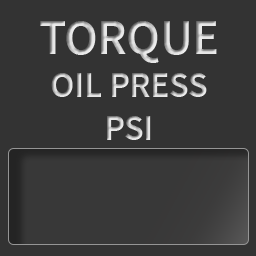
<style>
.page{position:relative;width:256px;height:256px;background:#333333}
.page>*{position:absolute;margin:0}
.t1{font:36px "SourceSansPro-SemiBold";letter-spacing:-0.01em}
.t2{font:50px "SourceSansPro-SemiBold";letter-spacing:-0.01em}
</style>
<div class="page">
<p class="t1" style="left:40px;top:21px;width:177px;height:119px;text-align:center"><span class="t2">TORQUE<br></span>OIL PRESS<br>PSI</p>
</div>
